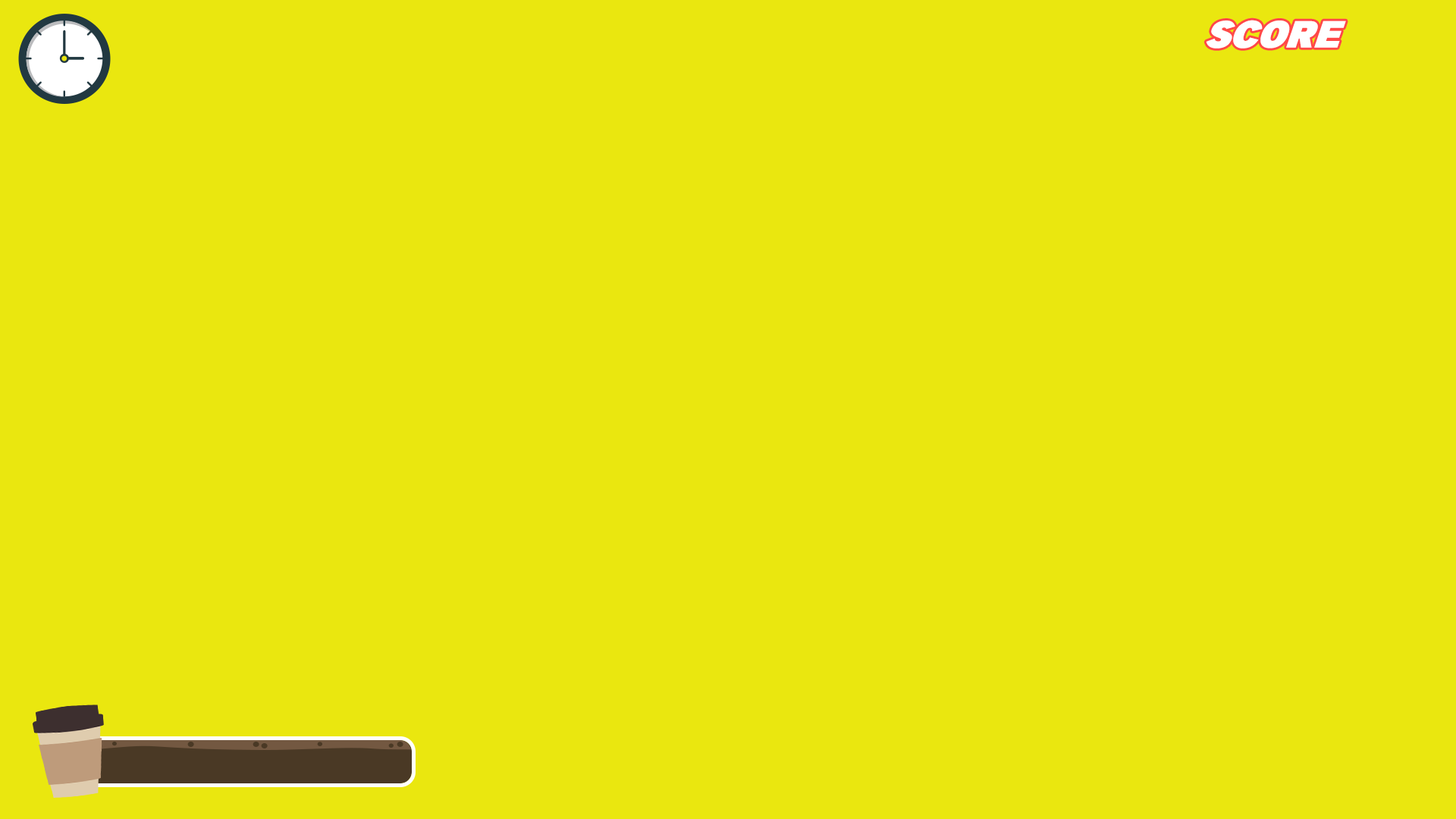
<style>
.page{position:relative;width:1456px;height:819px;background:#eae70f}
.page>*{position:absolute;margin:0}
.t1{font:37.2px "aBigDeal";color:#ffffff;scale:0.95 1}
</style>
<div class="page">
<p class="t1" style="left:1206px;top:20px;width:140px;height:29px">SCORE</p>
</div>
